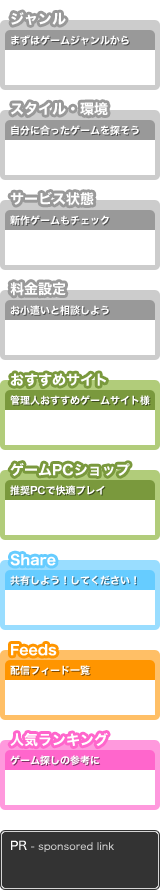
<style>
.page{position:relative;width:160px;height:890px;background:#ffffff}
.page>*{position:absolute;margin:0}
.t1{font:14px "HiraginoKaku-W7-90msp-RKSJ-H";color:#ffffff}
.t2{font:10px "HiraginoKaku-W7-90msp-RKSJ-H";color:#ffffff}
.t3{font:10px "HiraginoKaku-W5-90msp-RKSJ-H";color:#cccccc}
.t4{font:12px "HiraginoKaku-W5-90msp-RKSJ-H";color:#ffffff}
</style>
<div class="page">
<p class="t1" style="left:11px;top:12px;width:55px;height:13px">ジャンル</p>
<p class="t2" style="left:11px;top:35px;width:118px;height:10px">まずはゲームジャンルから</p>
<p class="t1" style="left:11px;top:102px;width:97px;height:14px">スタイル・環境</p>
<p class="t2" style="left:11px;top:125px;width:128px;height:10px">自分に合ったゲームを探そう</p>
<p class="t1" style="left:10px;top:192px;width:84px;height:14px">サービス状態</p>
<p class="t2" style="left:10px;top:215px;width:99px;height:10px">新作ゲームもチェック</p>
<p class="t1" style="left:10px;top:282px;width:56px;height:14px">料金設定</p>
<p class="t2" style="left:10px;top:305px;width:99px;height:10px">お小遣いと相談しよう</p>
<p class="t1" style="left:10px;top:373px;width:96px;height:14px">おすすめサイト</p>
<p class="t2" style="left:10px;top:395px;width:140px;height:10px">管理人おすすめゲームサイト様</p>
<p class="t1" style="left:10px;top:463px;width:120px;height:13px">ゲームPCショップ</p>
<p class="t2" style="left:10px;top:485px;width:95px;height:10px">推奨PCで快適プレイ</p>
<p class="t1" style="left:10px;top:553px;width:46px;height:13px">Share</p>
<p class="t2" style="left:10px;top:575px;width:126px;height:10px">共有しよう！してください！</p>
<p class="t1" style="left:11px;top:644px;width:46px;height:12px">Feeds</p>
<p class="t2" style="left:10px;top:665px;width:80px;height:10px">配信フィード一覧</p>
<p class="t1" style="left:10px;top:733px;width:98px;height:14px">人気ランキング</p>
<p class="t2" style="left:10px;top:755px;width:90px;height:10px">ゲーム探しの参考に</p>
<p class="t3" style="left:11px;top:840px;width:103px;height:12px"><span class="t4">PR</span> - sponsored link</p>
</div>
